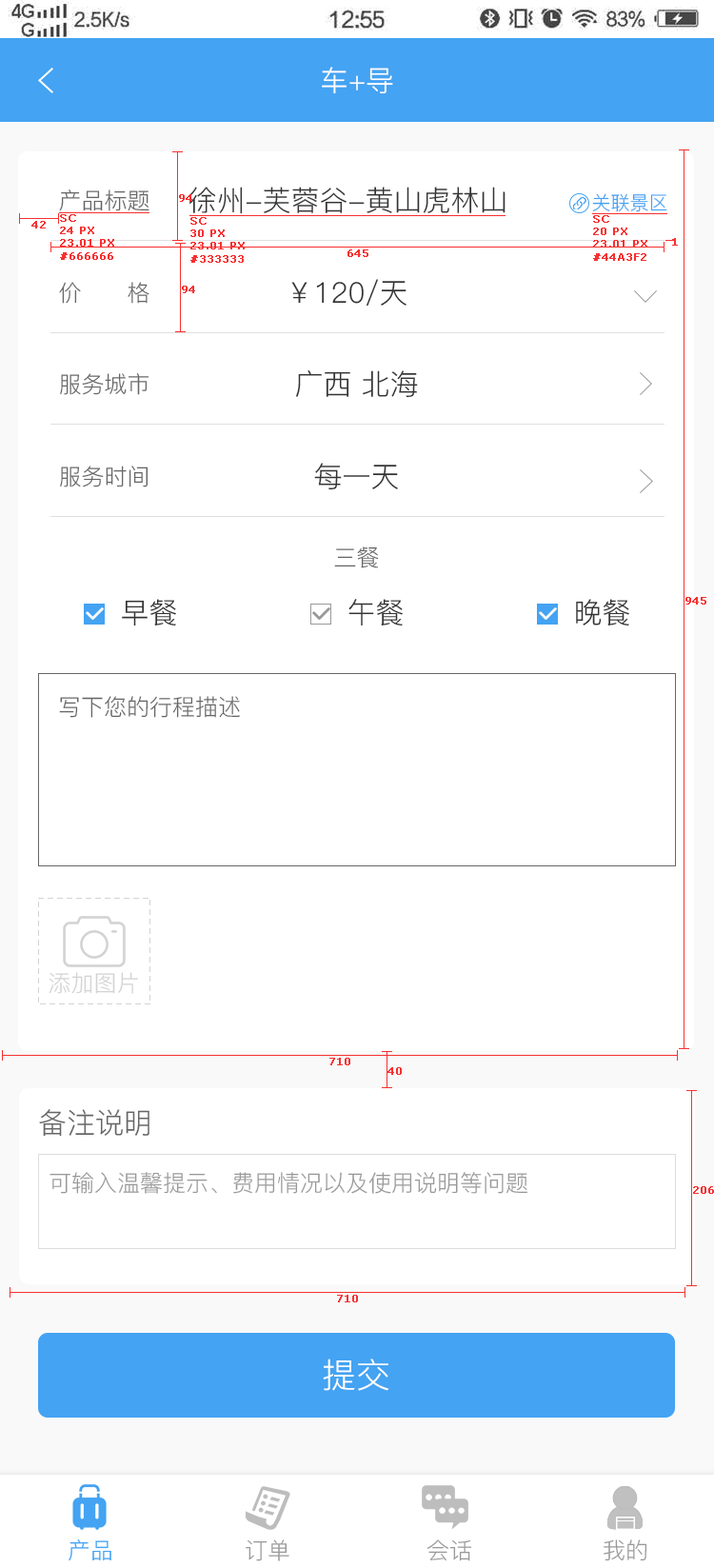
<style>
.page{position:relative;width:714px;height:1568px;background:#ffffff}
.page>*{position:absolute;margin:0}
.t1{font:28.6px "PingFang-SC-Regular";color:#ffffff;text-transform:uppercase}
.t2{font:22.8px "PingFang-SC-Regular";color:#666666;text-transform:uppercase}
.t3{font:10.5px "Verdana";color:#f83030;font-weight:bold}
.t4{font:28.6px "PingFang-SC-Regular";color:#333333;text-transform:uppercase}
.t5{font:19px "PingFang-SC-Regular";color:#44a3f2;text-transform:uppercase}
.t6{font:22.8px "PingFang-SC-Regular";color:#d3d3d3;text-transform:uppercase}
.t7{font:28.6px "PingFang-SC-Regular";color:#666666;text-transform:uppercase}
.t8{font:22.8px "PingFang-SC-Regular";color:#999999;text-transform:uppercase}
.t9{font:34.3px "PingFang-SC-Regular";color:#ffffff;text-transform:uppercase}
.t10{font:22.8px "PingFang-SC-Regular";color:#44a3f2;text-transform:uppercase}
</style>
<div class="page">
<p class="t1" style="left:322px;top:67px;width:71px;height:27px">车+导</p>
<p class="t2" style="left:59px;top:189px;width:90px;height:22px">产品标题</p>
<p class="t3" style="left:179px;top:194px;width:13px;height:8px">94</p>
<p class="t4" style="left:189px;top:187px;width:317px;height:27px">徐州-芙蓉谷-黄山虎林山</p>
<p class="t5" style="left:592px;top:193px;width:75px;height:19px">关联景区</p>
<p class="t3" style="left:31px;top:221px;width:15px;height:7px">42</p>
<p class="t3" style="left:60px;top:214px;width:54px;height:46px">SC<br>24 PX<br>23.01 PX<br>#666666</p>
<p class="t3" style="left:190px;top:217px;width:55px;height:46px">SC<br>30 PX<br>23.01 PX<br>#333333</p>
<p class="t3" style="left:593px;top:215px;width:54px;height:46px">SC<br>20 PX<br>23.01 PX<br>#44A3F2</p>
<p class="t3" style="left:672px;top:238px;width:6px;height:8px">1</p>
<p class="t3" style="left:347px;top:249px;width:21px;height:8px">645</p>
<p class="t2" style="left:59px;top:282px;width:90px;height:22px">价      格</p>
<p class="t4" style="left:291px;top:279px;width:116px;height:28px">￥120/天</p>
<p class="t3" style="left:182px;top:286px;width:13px;height:7px">94</p>
<p class="t2" style="left:60px;top:373px;width:89px;height:22px">服务城市</p>
<p class="t4" style="left:296px;top:370px;width:122px;height:28px">广西 北海</p>
<p class="t2" style="left:60px;top:466px;width:89px;height:21px">服务时间</p>
<p class="t4" style="left:314px;top:463px;width:84px;height:27px">每一天</p>
<p class="t2" style="left:334px;top:546px;width:45px;height:22px">三餐</p>
<p class="t4" style="left:122px;top:599px;width:54px;height:27px">早餐</p>
<p class="t4" style="left:348px;top:599px;width:55px;height:27px">午餐</p>
<p class="t4" style="left:576px;top:599px;width:53px;height:27px">晚餐</p>
<p class="t3" style="left:685px;top:597px;width:21px;height:8px">945</p>
<p class="t2" style="left:59px;top:696px;width:181px;height:22px">写下您的行程描述</p>
<p class="t6" style="left:49px;top:972px;width:89px;height:22px">添加图片</p>
<p class="t3" style="left:329px;top:1058px;width:21px;height:7px">710</p>
<p class="t3" style="left:387px;top:1067px;width:15px;height:8px">40</p>
<p class="t7" style="left:39px;top:1109px;width:110px;height:28px">备注说明</p>
<p class="t8" style="left:50px;top:1172px;width:477px;height:22px">可输入温馨提示、费用情况以及使用说明等问题</p>
<p class="t3" style="left:693px;top:1186px;width:21px;height:8px">206</p>
<p class="t3" style="left:337px;top:1295px;width:21px;height:7px">710</p>
<p class="t9" style="left:323px;top:1359px;width:66px;height:32px">提交</p>
<p class="t10" style="left:69px;top:1539px;width:42px;height:22px">产品</p>
<p class="t8" style="left:246px;top:1539px;width:43px;height:22px">订单</p>
<p class="t8" style="left:427px;top:1539px;width:44px;height:22px">会话</p>
<p class="t8" style="left:604px;top:1539px;width:43px;height:22px">我的</p>
</div>
